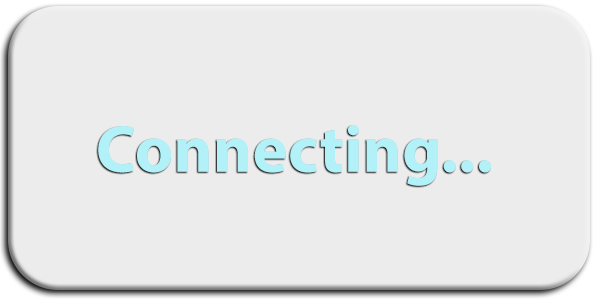
<style>
.page{position:relative;width:600px;height:300px;background:#ececec}
.page>*{position:absolute;margin:0}
.t1{font:66.7px "MyriadPro-Bold";letter-spacing:0.005em;color:#b1f1f7}
</style>
<div class="page">
<p class="t1" style="left:98px;top:125px;width:393px;height:61px">Connecting...</p>
</div>
